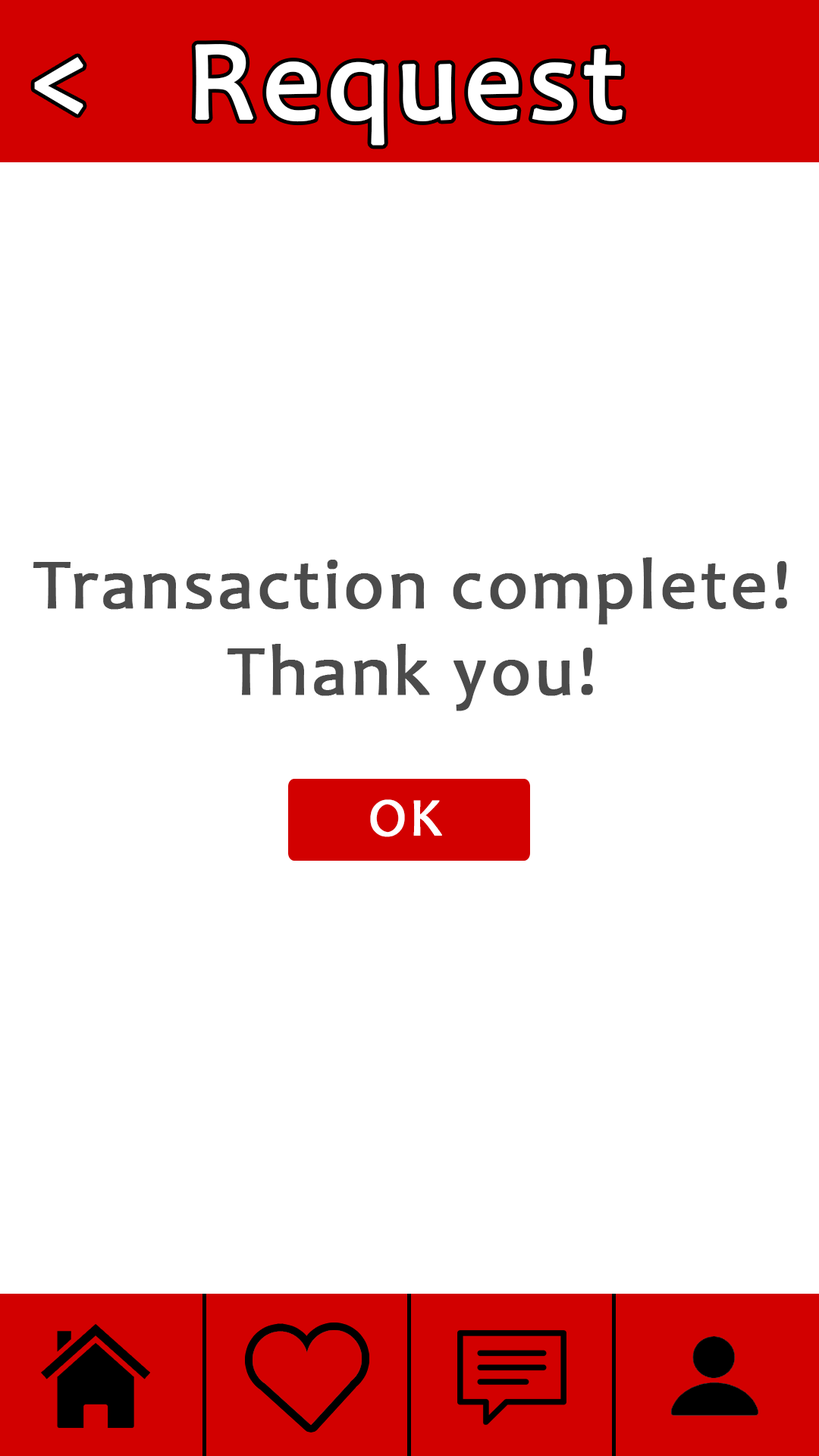
<style>
.page{position:relative;width:819px;height:1456px;background:#ffffff}
.page>*{position:absolute;margin:0}
.t1{font:113.4px "Candara";letter-spacing:0.03em;color:#ffffff;font-weight:bold}
.t2{font:113.7px "Candara";letter-spacing:0.03em;color:#ffffff;font-weight:bold}
.t3{font:72px "Candara";letter-spacing:0.03em;color:#4b4b4b;font-weight:bold}
.t4{font:54.3px "Candara";letter-spacing:0.03em;color:#ffffff;font-weight:bold}
</style>
<div class="page">
<p class="t1" style="left:195px;top:44px;width:428px;height:102px">Request</p>
<p class="t2" style="left:34px;top:57px;width:49px;height:58px">&lt;</p>
<p class="t3" style="left:33px;top:557px;width:754px;height:154px;text-align:center">Transaction complete!<br>Thank you!</p>
<p class="t4" style="left:370px;top:799px;width:72px;height:38px">OK</p>
</div>
